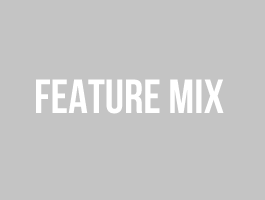
<style>
.page{position:relative;width:265px;height:200px;background:#c4c4c4}
.page>*{position:absolute;margin:0}
.t1{font:48px "BebasNeue";color:#ffffff}
</style>
<div class="page">
<p class="t1" style="left:36px;top:79px;width:188px;height:35px">feature mix</p>
</div>
